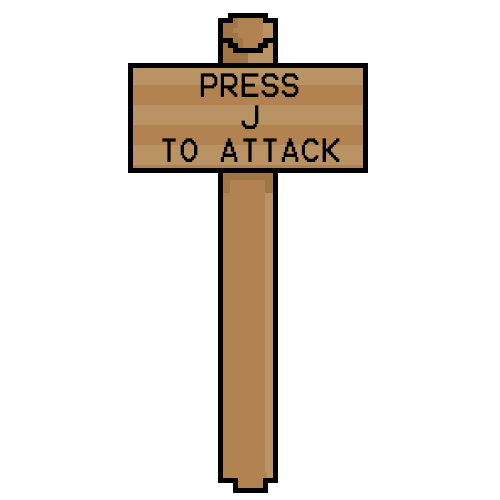
<style>
.page{position:relative;width:500px;height:500px;background:#ffffff}
.page>*{position:absolute;margin:0}
.t1{font:27px "Terminal";color:#000000}
</style>
<div class="page">
<p class="t1" style="left:162px;top:73px;width:178px;height:89px;text-align:center">PRESS<br>J<br>TO ATTACK</p>
</div>
